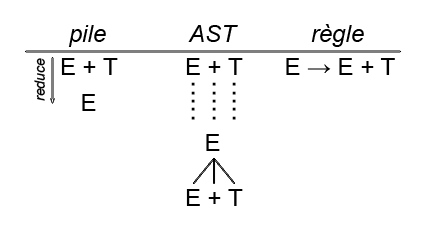
<style>
.page{position:relative;width:425px;height:230px;background:#ffffff}
.page>*{position:absolute;margin:0}
.t1{font:24px "Arial-ItalicMT";color:#000000}
.t2{font:14px "Arial-ItalicMT";color:#000000}
.t3{font:24px "ArialMT";color:#000000}
.t4{font:30px "ArialMT";color:#000000}
</style>
<div class="page">
<p class="t1" style="left:68px;top:25px;width:38px;height:22px">pile</p>
<p class="t1" style="left:188px;top:25px;width:50px;height:17px">AST</p>
<p class="t1" style="left:311px;top:24px;width:53px;height:23px">règle</p>
<p class="t2" style="left:34px;top:58px;width:11px;height:43px;rotate:-90deg">reduce</p>
<p class="t3" style="left:61px;top:58px;width:57px;height:17px">E + T</p>
<p class="t3" style="left:186px;top:58px;width:57px;height:17px">E + T</p>
<p class="t3" style="left:286px;top:58px;width:109px;height:17px">E → E + T</p>
<p class="t4" style="left:191px;top:82px;width:4px;height:38px;rotate:90deg">.....</p>
<p class="t4" style="left:212px;top:82px;width:4px;height:38px;rotate:90deg">.....</p>
<p class="t4" style="left:232px;top:82px;width:4px;height:38px;rotate:90deg">.....</p>
<p class="t3" style="left:82px;top:94px;width:14px;height:17px">E</p>
<p class="t3" style="left:206px;top:134px;width:14px;height:17px">E</p>
<p class="t3" style="left:186px;top:189px;width:57px;height:17px">E + T</p>
</div>
